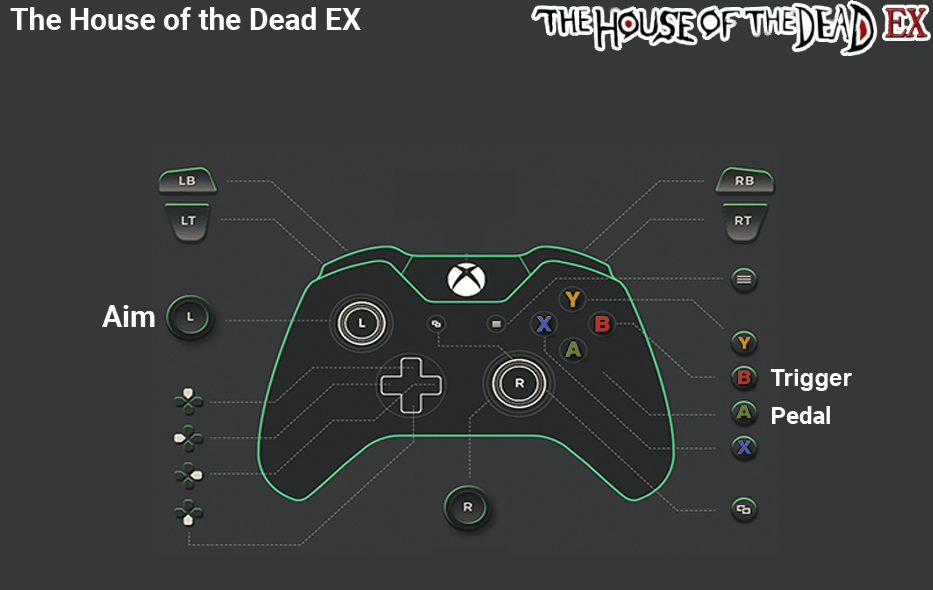
<style>
.page{position:relative;width:933px;height:590px;background:#363838}
.page>*{position:absolute;margin:0}
.t1{font:30px "Roboto-Bold";color:#ffffff}
.t2{font:30px "Roboto-Bold";color:#fefefe}
.t3{font:24px "Arial-BoldMT";color:#fefefe}
.t4{font:24px "Roboto-Bold";color:#ffffff}
</style>
<div class="page">
<p class="t1" style="left:10px;top:7px;width:351px;height:23px">The House of the Dead EX</p>
<p class="t2" style="left:102px;top:305px;width:53px;height:22px">Aim</p>
<p class="t3" style="left:771px;top:369px;width:81px;height:22px">Trigger</p>
<p class="t4" style="left:772px;top:406px;width:58px;height:18px">Pedal</p>
</div>
